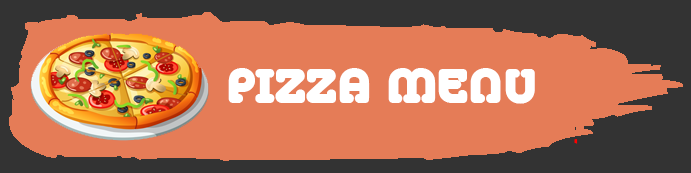
<style>
.page{position:relative;width:691px;height:173px;background:#e57c57}
.page>*{position:absolute;margin:0}
.t1{font:48px "MelodBold";letter-spacing:0.02em;color:#ffffff}
</style>
<div class="page">
<p class="t1" style="left:228px;top:68px;width:307px;height:36px">PIZZA MENU</p>
</div>
